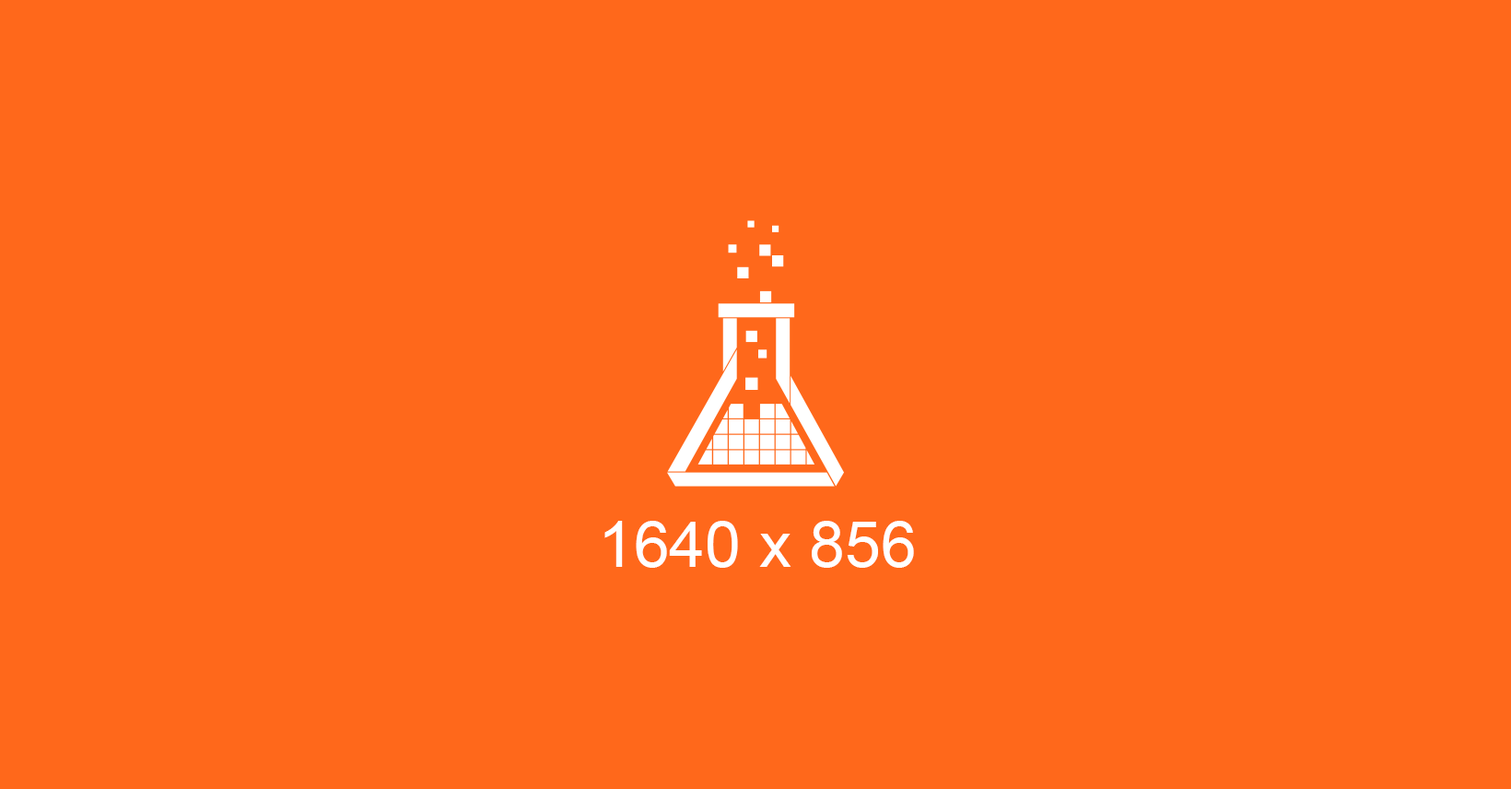
<style>
.page{position:relative;width:1511px;height:789px;background:#ff681b}
.page>*{position:absolute;margin:0}
.t1{font:64.5px "ArialMT";color:#ffffff}
</style>
<div class="page">
<p class="t1" style="left:605px;top:521px;width:309px;height:47px">1640 x 856</p>
</div>
